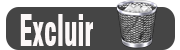
<style>
.page{position:relative;width:180px;height:50px;background:#454545}
.page>*{position:absolute;margin:0}
.t1{font:42.9px "Swiss721BT-BlackCondensed";color:#fcf8f8;scale:0.61 1}
</style>
<div class="page">
<p class="t1" style="left:20px;top:14px;width:73px;height:32px">Excluir</p>
</div>
